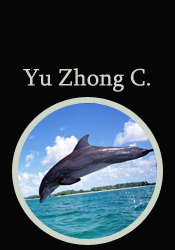
<style>
.page{position:relative;width:175px;height:250px;background:#070606}
.page>*{position:absolute;margin:0}
.t1{font:24px "Sylfaen";color:#cdd5c8}
</style>
<div class="page">
<p class="t1" style="left:23px;top:68px;width:127px;height:24px">Yu Zhong C.</p>
</div>
